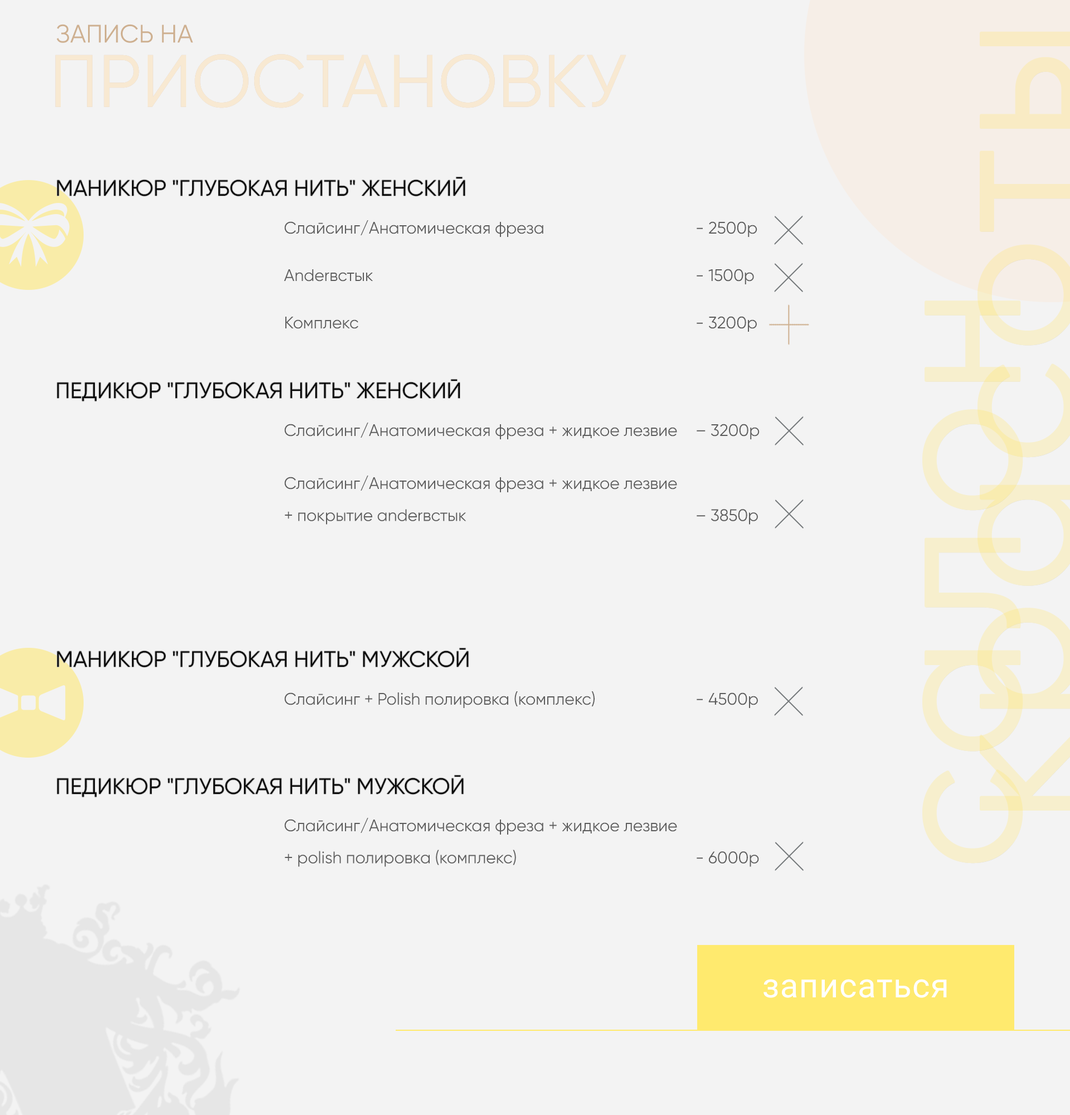
<style>
.page{position:relative;width:1070px;height:1115px;background:#f3f3f3}
.page>*{position:absolute;margin:0}
.t1{font:25.3px "Gilroy-Regular";color:#d8b997}
.t2{font:73.8px "Gilroy-Regular";color:#f8e9d2}
.t3{font:22.2px "Gilroy-Regular";color:#000000}
.t4{font:16.7px "Gilroy-Regular";color:#5c5c5c}
.t5{font:187.2px "Gilroy-Regular";letter-spacing:0.05em;color:#f7efcd}
.t6{font:16.7px/32px "Gilroy-Regular";color:#5c5c5c}
.t7{font:33.4px "Roboto-Regular";letter-spacing:0.025em;color:#ffffff}
</style>
<div class="page">
<p class="t1" style="left:56px;top:24px;width:137px;height:19px">ЗАПИСЬ НА</p>
<p class="t2" style="left:55px;top:54px;width:571px;height:54px">ПРИОСТАНОВКУ</p>
<p class="t2" style="left:55px;top:54px;width:571px;height:54px">ПРИОСТАНОВКУ</p>
<p class="t3" style="left:57px;top:177px;width:408px;height:19px">МАНИКЮР "ГЛУБОКАЯ НИТЬ" ЖЕНСКИЙ</p>
<p class="t4" style="left:284px;top:220px;width:473px;height:17px">Слайсинг/Анатомическая фреза         - 2500р</p>
<p class="t4" style="left:284px;top:269px;width:470px;height:15px">Аnderвстык                  - 1500р</p>
<p class="t5" style="left:923px;top:301px;width:99px;height:561px;rotate:-90deg">салон</p>
<p class="t4" style="left:285px;top:316px;width:472px;height:16px">Комплекс                  - 3200р</p>
<p class="t3" style="left:57px;top:379px;width:403px;height:22px">ПЕДИКЮР "ГЛУБОКАЯ НИТЬ" ЖЕНСКИЙ</p>
<p class="t4" style="left:284px;top:422px;width:476px;height:17px">Слайсинг/Анатомическая фреза + жидкое лезвие – 3200р</p>
<p class="t6" style="left:284px;top:475px;width:474px;height:49px">Слайсинг/Анатомическая фреза + жидкое лезвие<br>+ покрытие anderвстык             – 3850р</p>
<p class="t3" style="left:57px;top:648px;width:412px;height:19px">МАНИКЮР "ГЛУБОКАЯ НИТЬ" МУЖСКОЙ</p>
<p class="t4" style="left:284px;top:691px;width:474px;height:17px">Слайсинг + Polish полировка (комплекс)      - 4500р</p>
<p class="t3" style="left:57px;top:775px;width:407px;height:22px">ПЕДИКЮР "ГЛУБОКАЯ НИТЬ" МУЖСКОЙ</p>
<p class="t6" style="left:284px;top:817px;width:475px;height:50px">Слайсинг/Анатомическая фреза + жидкое лезвие<br>+ polish полировка (комплекс)          - 6000р</p>
<p class="t7" style="left:763px;top:979px;width:184px;height:18px">записаться</p>
</div>
